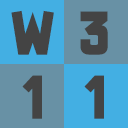
<style>
.page{position:relative;width:128px;height:128px;background:#6891a5}
.page>*{position:absolute;margin:0}
.t1{font:57px "MrHeadlinesFancy";letter-spacing:0.15em;color:#444444}
</style>
<div class="page">
<p class="t1" style="left:11px;top:10px;width:43px;height:45px">W</p>
<p class="t1" style="left:80px;top:11px;width:28px;height:44px">3</p>
<p class="t1" style="left:22px;top:75px;width:20px;height:44px">1</p>
<p class="t1" style="left:84px;top:75px;width:20px;height:44px">1</p>
</div>
